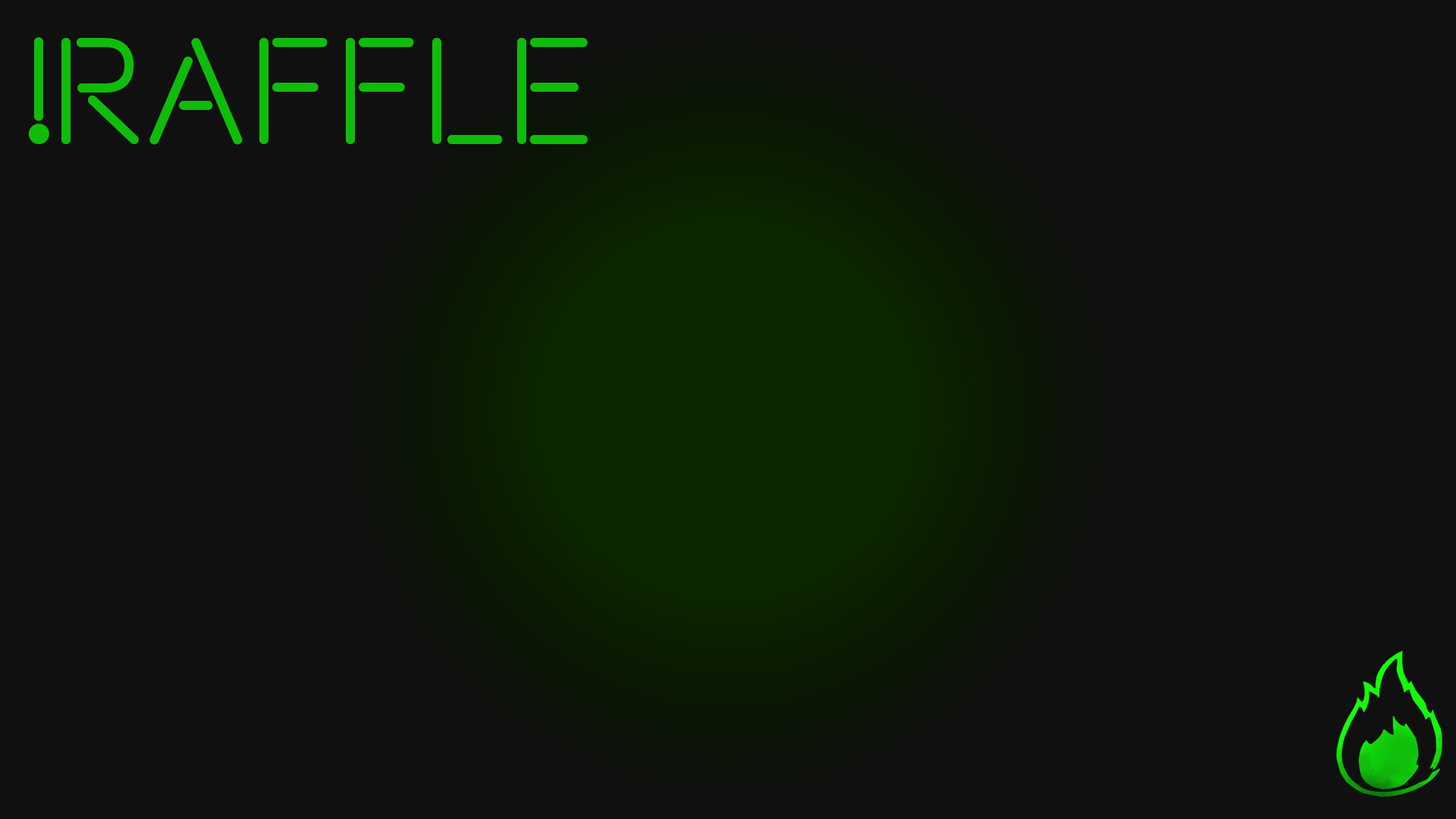
<style>
.page{position:relative;width:1456px;height:819px;background:#101010}
.page>*{position:absolute;margin:0}
.t1{font:151.7px "Beon-Medium";color:#0fbc0a}
</style>
<div class="page">
<p class="t1" style="left:29px;top:37px;width:559px;height:108px">!raffle</p>
</div>
